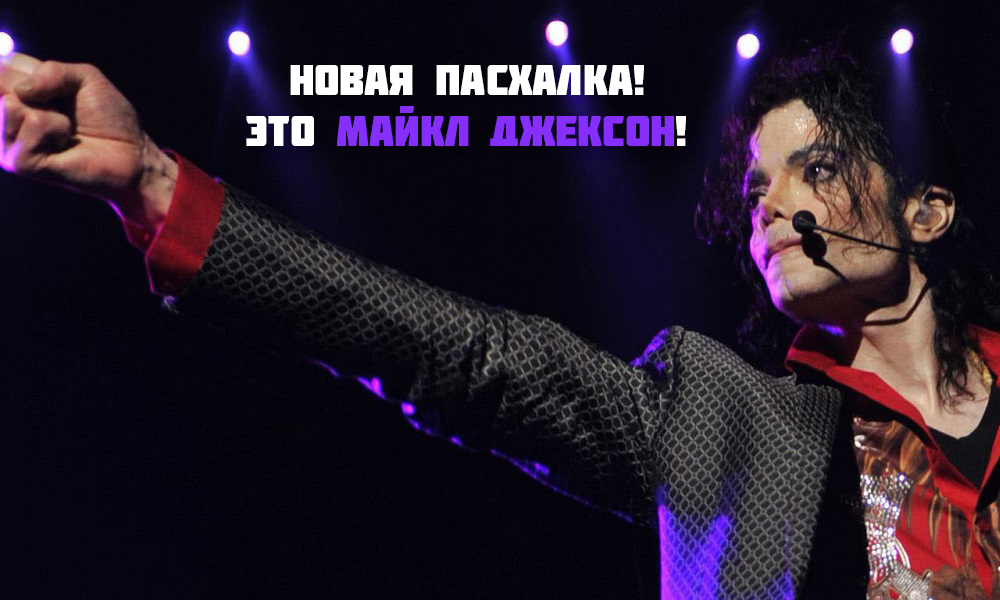
<style>
.page{position:relative;width:1000px;height:600px}
.page>*{position:absolute;margin:0}
.t1{font:42.2px "Molot";color:#ffffff}
.t2{font:42.2px "Molot";color:#862efc}
</style>
<div class="page">
<p class="t1" style="left:246px;top:65px;width:440px;height:81px;text-align:center">новая пасхалка!<br>это <span class="t2">майкл джексон</span>!</p>
</div>
